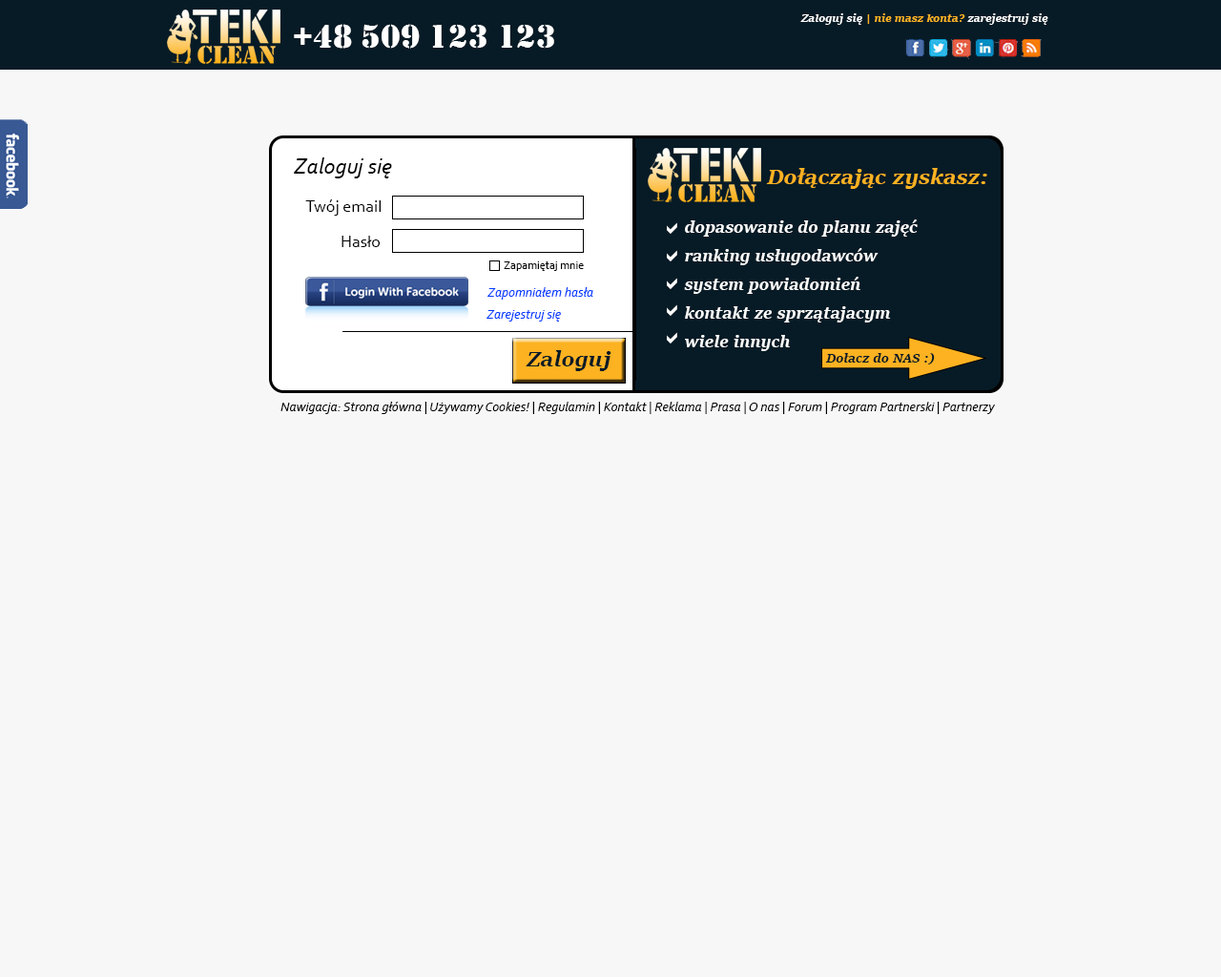
<style>
.page{position:relative;width:1221px;height:977px;background:#f7f7f7}
.page>*{position:absolute;margin:0}
.t1{font:11.4px "SitkaText-BoldItalic";color:#fcb324}
.t2{font:11.4px "SitkaText-BoldItalic";color:#ffffff}
.t3{font:34.3px "Stencil";color:#ffffff}
.t4{font:22.9px "Corbel-Italic";color:#000000}
.t5{font:22.9px "SitkaText-BoldItalic";color:#fcb221}
.t6{font:17.2px "Corbel";color:#000000}
.t7{font:17.2px/28.6px "SitkaText-BoldItalic";color:#ffffff}
.t8{font:11.4px "Corbel";color:#000000}
.t9{font:13.4px "Corbel-Italic";color:#003cff}
.t10{font:22.9px "SitkaText-BoldItalic";color:#071b26}
.t11{font:13.4px "SitkaText-BoldItalic";color:#071b26}
.t12{font:13.4px "Corbel-Italic";color:#010101}
</style>
<div class="page">
<p class="t1" style="left:800px;top:13px;width:248px;height:12px"><span class="t2">Zaloguj się </span>| nie masz konta? <span class="t2">zarejestruj się</span></p>
<p class="t3" style="left:294px;top:24px;width:260px;height:25px">+48 509 123 123</p>
<p class="t4" style="left:294px;top:157px;width:98px;height:21px">Zaloguj się</p>
<p class="t5" style="left:766px;top:168px;width:221px;height:21px">Dołączając zyskasz:</p>
<p class="t6" style="left:305px;top:199px;width:77px;height:17px">Twój email</p>
<p class="t7" style="left:684px;top:219px;width:234px;height:132px">dopasowanie do planu zajęć<br>ranking usługodawców<br>system powiadomień<br>kontakt ze sprzątajacym<br>wiele innych</p>
<p class="t6" style="left:341px;top:236px;width:40px;height:11px">Hasło</p>
<p class="t8" style="left:504px;top:261px;width:80px;height:10px">Zapamiętaj mnie</p>
<p class="t9" style="left:487px;top:287px;width:106px;height:12px">Zapomniałem hasła</p>
<p class="t9" style="left:486px;top:310px;width:75px;height:11px">Zarejestruj się</p>
<p class="t10" style="left:526px;top:350px;width:85px;height:21px">Zaloguj</p>
<p class="t11" style="left:825px;top:353px;width:110px;height:11px">Dołacz do NAS :)</p>
<p class="t12" style="left:280px;top:402px;width:716px;height:12px">Nawigacja: Strona główna | Używamy Cookies! | Regulamin | Kontakt | Reklama | Prasa | O nas | Forum | Program Partnerski | Partnerzy</p>
</div>
